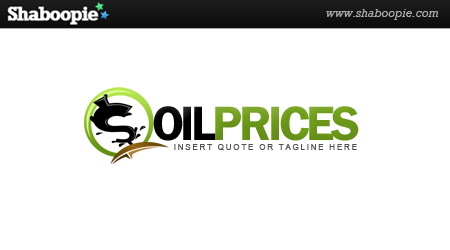
<style>
.page{position:relative;width:450px;height:250px;background:#ffffff}
.page>*{position:absolute;margin:0}
.t1{font:50px "FranklinGothic-Demi";letter-spacing:-0.075em;color:#71a01a;text-transform:uppercase}
.t2{font:50px "FranklinGothic-Demi";letter-spacing:-0.075em;color:#000000;text-transform:uppercase}
.t3{font:8.3px "ArialMT";letter-spacing:0.19em;color:#515151}
</style>
<div class="page">
<p class="t1" style="left:153px;top:106px;width:206px;height:35px"><span class="t2">Oil</span>Prices</p>
<p class="t3" style="left:174px;top:144px;width:183px;height:7px">INSERT QUOTE OR TAGLINE HERE</p>
</div>
